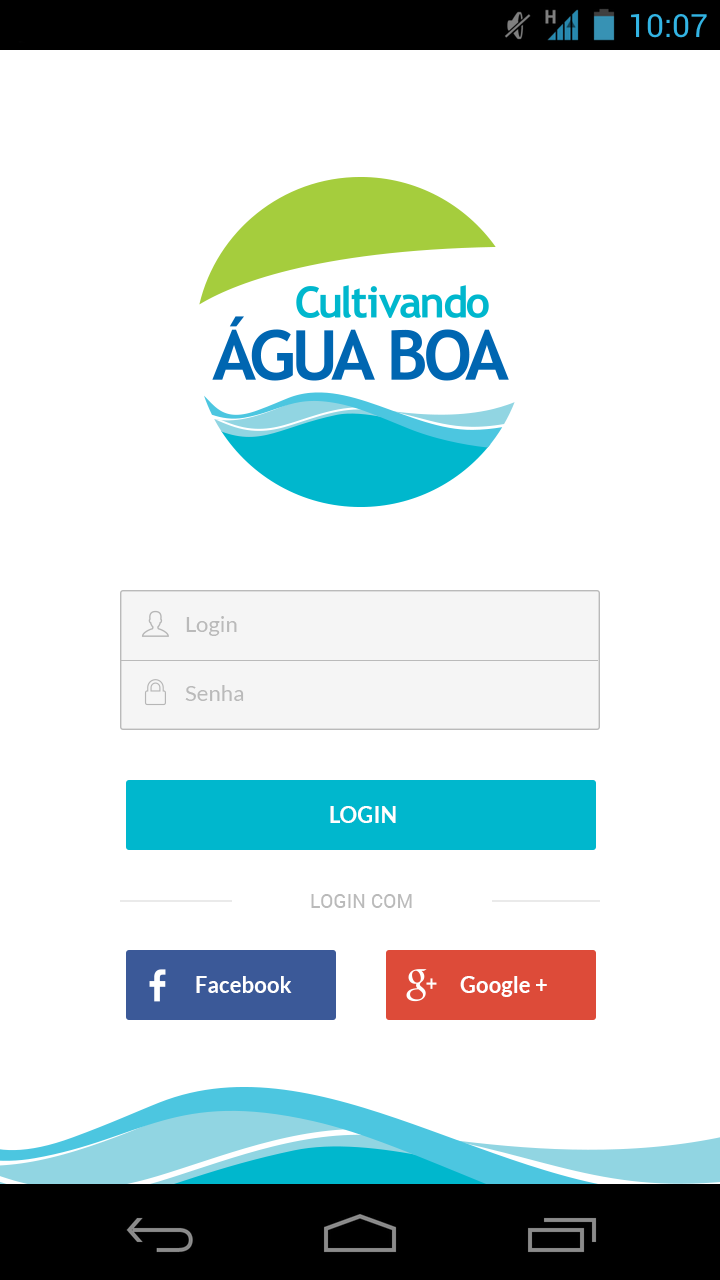
<style>
.page{position:relative;width:720px;height:1280px;background:#ffffff}
.page>*{position:absolute;margin:0}
.t1{font:22.2px "Lato-Regular";color:#bababa}
.t2{font:22.2px "Lato-Bold";color:#ffffff}
.t3{font:19.4px "Roboto-Regular";color:#bababa;text-transform:uppercase}
</style>
<div class="page">
<p class="t1" style="left:186px;top:616px;width:51px;height:20px">Login</p>
<p class="t1" style="left:185px;top:685px;width:59px;height:16px">Senha</p>
<p class="t2" style="left:330px;top:806px;width:66px;height:17px">LOGIN</p>
<p class="t3" style="left:311px;top:894px;width:101px;height:14px">Login com</p>
<p class="t2" style="left:196px;top:976px;width:96px;height:17px">Facebook</p>
<p class="t2" style="left:460px;top:976px;width:87px;height:21px">Google +</p>
</div>
